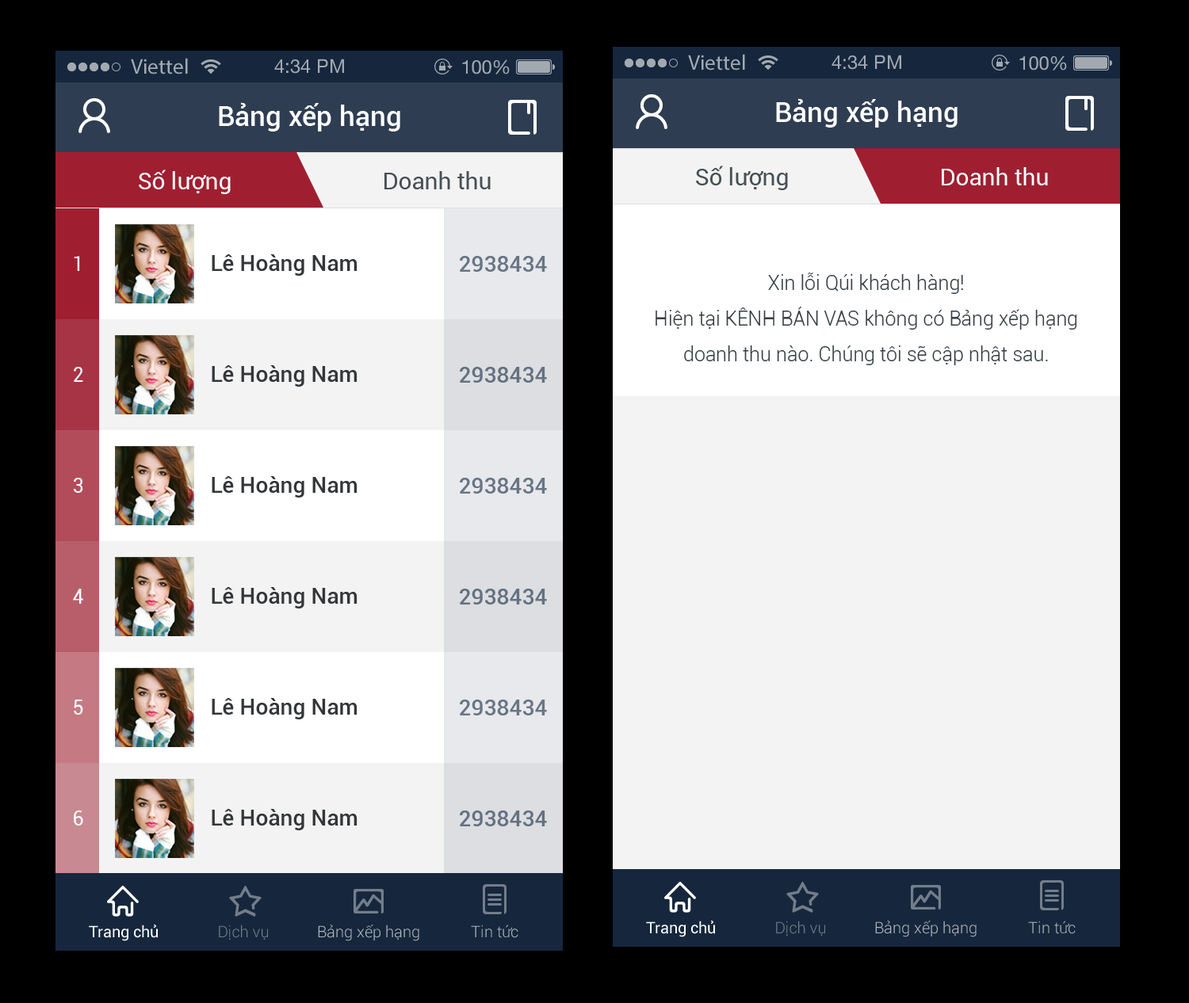
<style>
.page{position:relative;width:1189px;height:1003px;background:#f3f3f3}
.page>*{position:absolute;margin:0}
.t1{font:27.7px "Roboto-Medium";color:#fefefe}
.t2{font:23.8px "Roboto-Regular";color:#ffffff}
.t3{font:23.8px "Roboto-Regular";color:#475055}
.t4{font:19.8px "Roboto-Regular";color:#ffffff}
.t5{font:22.2px "Roboto-Medium";color:#333739}
.t6{font:22.2px "Roboto-Medium";color:#697585}
.t7{font:19.8px/35.7px "Roboto-Light";color:#353f45}
.t8{font:22.2px "Roboto-Medium";color:#657180}
.t9{font:15.8px "Roboto-Regular";color:#ffffff}
.t10{font:15.8px "Roboto-Light";color:#737d8b}
.t11{font:15.8px "Roboto-Light";color:#b0b5bd}
</style>
<div class="page">
<p class="t1" style="left:776px;top:98px;width:181px;height:30px">Bảng xếp hạng</p>
<p class="t1" style="left:219px;top:102px;width:181px;height:30px">Bảng xếp hạng</p>
<p class="t2" style="left:139px;top:170px;width:92px;height:24px">Số lượng</p>
<p class="t3" style="left:384px;top:171px;width:107px;height:18px">Doanh thu</p>
<p class="t3" style="left:696px;top:166px;width:92px;height:24px">Số lượng</p>
<p class="t2" style="left:941px;top:167px;width:107px;height:18px">Doanh thu</p>
<p class="t4" style="left:74px;top:256px;width:6px;height:15px">1</p>
<p class="t5" style="left:212px;top:254px;width:145px;height:22px">Lê Hoàng Nam</p>
<p class="t6" style="left:460px;top:256px;width:87px;height:16px">2938434</p>
<p class="t7" style="left:655px;top:273px;width:422px;height:92px;text-align:center">Xin lỗi Qúi khách hàng!<br>Hiện tại KÊNH BÁN VAS không có Bảng xếp hạng doanh thu nào. Chúng tôi sẽ cập nhật sau.</p>
<p class="t5" style="left:212px;top:365px;width:145px;height:22px">Lê Hoàng Nam</p>
<p class="t4" style="left:74px;top:367px;width:9px;height:15px">2</p>
<p class="t8" style="left:460px;top:367px;width:87px;height:16px">2938434</p>
<p class="t4" style="left:74px;top:478px;width:9px;height:15px">3</p>
<p class="t5" style="left:212px;top:476px;width:145px;height:22px">Lê Hoàng Nam</p>
<p class="t6" style="left:460px;top:478px;width:87px;height:16px">2938434</p>
<p class="t4" style="left:73px;top:589px;width:10px;height:15px">4</p>
<p class="t5" style="left:212px;top:587px;width:145px;height:22px">Lê Hoàng Nam</p>
<p class="t8" style="left:460px;top:589px;width:87px;height:16px">2938434</p>
<p class="t4" style="left:74px;top:700px;width:9px;height:15px">5</p>
<p class="t5" style="left:212px;top:698px;width:145px;height:22px">Lê Hoàng Nam</p>
<p class="t6" style="left:460px;top:700px;width:87px;height:16px">2938434</p>
<p class="t5" style="left:212px;top:809px;width:145px;height:21px">Lê Hoàng Nam</p>
<p class="t4" style="left:74px;top:811px;width:9px;height:15px">6</p>
<p class="t8" style="left:460px;top:811px;width:87px;height:15px">2938434</p>
<p class="t9" style="left:89px;top:925px;width:69px;height:16px">Trang chủ</p>
<p class="t10" style="left:219px;top:925px;width:49px;height:15px">Dịch vụ</p>
<p class="t11" style="left:318px;top:925px;width:101px;height:16px">Bảng xếp hạng</p>
<p class="t11" style="left:471px;top:925px;width:47px;height:13px">Tin tức</p>
<p class="t9" style="left:646px;top:921px;width:69px;height:16px">Trang chủ</p>
<p class="t10" style="left:776px;top:921px;width:49px;height:15px">Dịch vụ</p>
<p class="t11" style="left:875px;top:921px;width:101px;height:16px">Bảng xếp hạng</p>
<p class="t11" style="left:1028px;top:921px;width:47px;height:13px">Tin tức</p>
</div>
